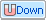
<style>
.page{position:relative;width:46px;height:20px;background:#c2e7ff}
.page>*{position:absolute;margin:0}
.t1{font:11px "Tahoma";color:#004bc3}
</style>
<div class="page">
<p class="t1" style="left:17px;top:6px;width:26px;height:8px">Down</p>
</div>
